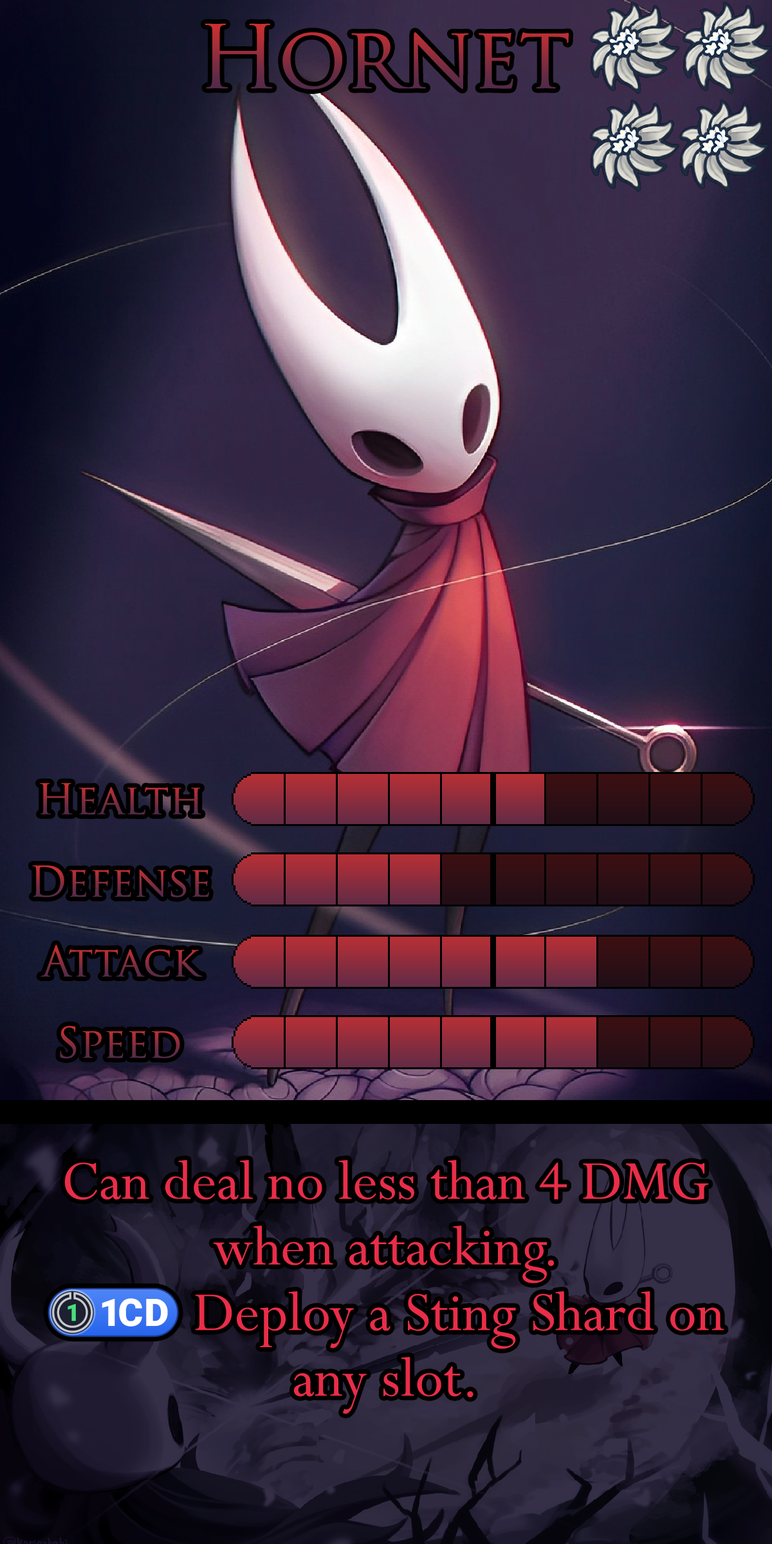
<style>
.page{position:relative;width:772px;height:1544px}
.page>*{position:absolute;margin:0}
.t1{font:146.7px "TrajanPro-Regular"}
.t2{font:70.8px "TrajanPro-Regular"}
.t3{font:105.5px/65.6px "Perpetua";color:#e92d49}
.t4{font:85.9px/65.6px "stoogedings-Regular";color:#e92d49}
</style>
<div class="page">
<p class="t1" style="left:205px;top:23px;width:364px;height:66px">Hornet</p>
<p class="t2" style="left:39px;top:783px;width:162px;height:32px">Health</p>
<p class="t2" style="left:32px;top:865px;width:177px;height:33px">Defense</p>
<p class="t2" style="left:41px;top:945px;width:162px;height:32px">Attack</p>
<p class="t2" style="left:60px;top:1026px;width:120px;height:33px">Speed</p>
<p class="t3" style="left:48px;top:1160px;width:677px;height:254px;text-align:center">Can deal no less than 4 DMG when attacking.<br><span class="t4">(1CD)</span> Deploy a Sting Shard on any slot.</p>
</div>
